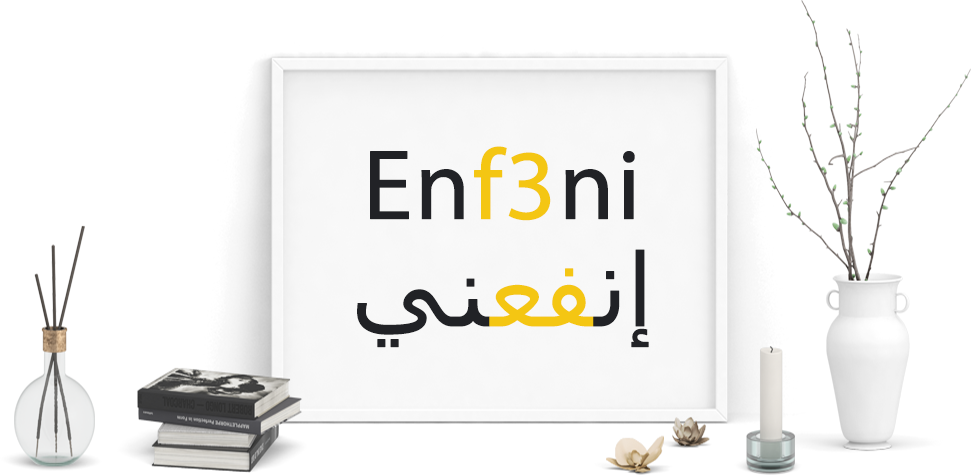
<style>
.page{position:relative;width:971px;height:475px;background:#ffffff}
.page>*{position:absolute;margin:0}
.t1{font:100px "MyriadPro-Regular";color:#212226;font-weight:bold}
.t2{font:100px "MyriadPro-Regular";color:#f4c613;font-weight:bold}
.t3{font:100px "Tahoma";color:#212226;font-weight:bold}
.t4{font:100px "Tahoma";color:#f4c613;font-weight:bold}
</style>
<div class="page">
<p class="t1" style="left:370px;top:146px;width:265px;height:75px">En<span class="t2">f3</span>ni</p>
<p class="t3" style="left:357px;top:249px;width:292px;height:99px">ﻲﻨ<span class="t4">ﻌﻔ</span>ﻧإ</p>
</div>
